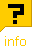
<style>
.page{position:relative;width:50px;height:50px;background:#ffffff}
.page>*{position:absolute;margin:0}
.t1{font:12px "Verdana";color:#ffcc00}
</style>
<div class="page">
<p class="t1" style="left:5px;top:36px;width:21px;height:10px">info</p>
</div>
